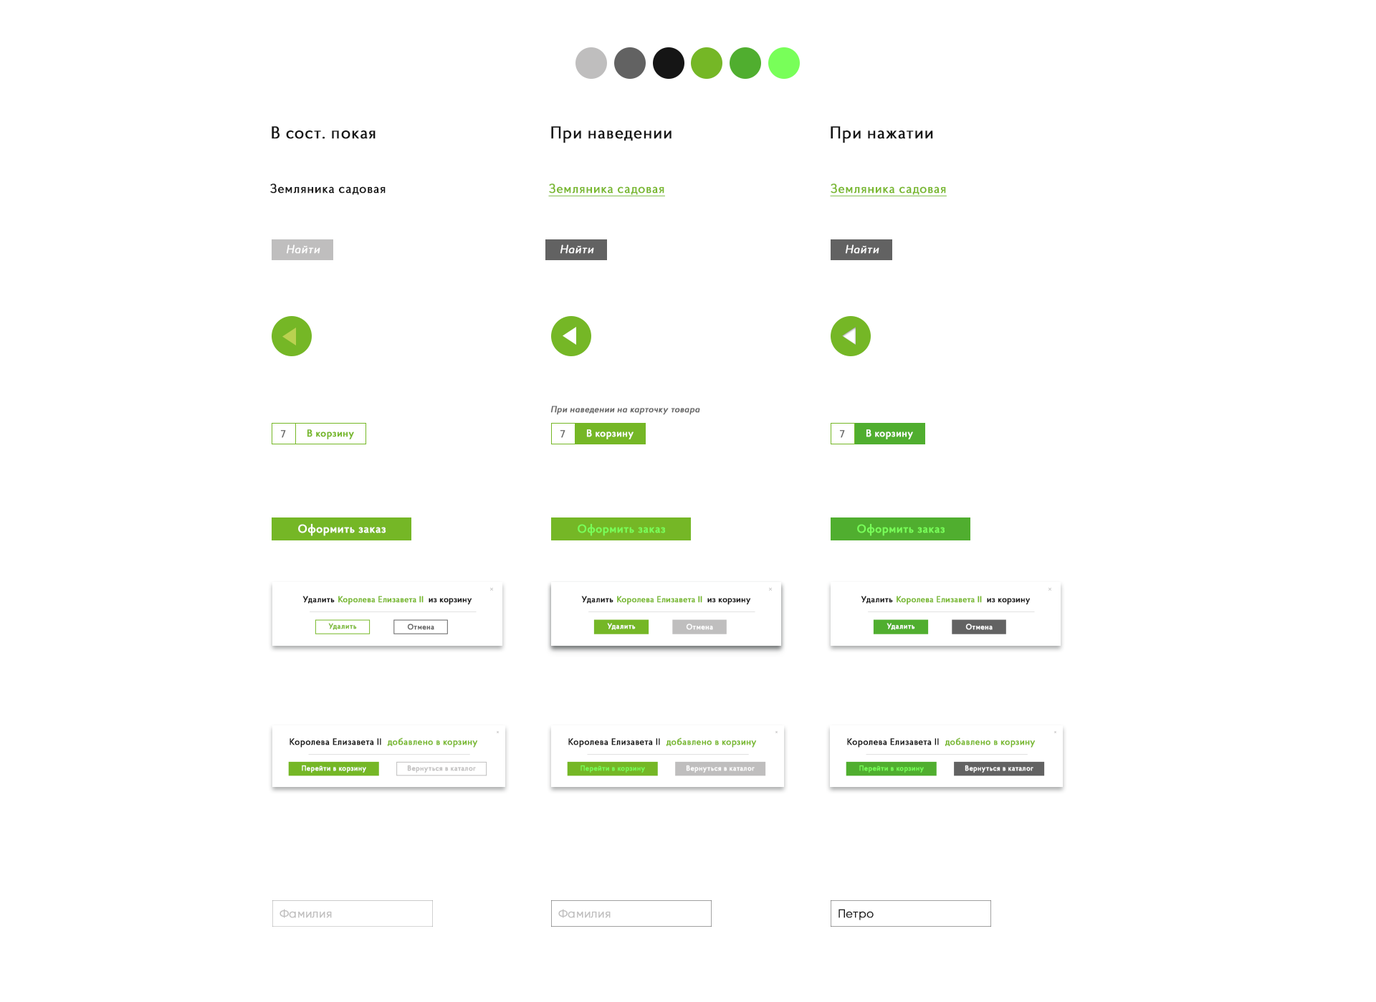
<style>
.page{position:relative;width:1376px;height:1002px;background:#ffffff}
.page>*{position:absolute;margin:0}
.t1{font:17.2px "ProbaPro-Regular";letter-spacing:0.025em;color:#151515;font-weight:bold}
.t2{font:12.9px "ProbaPro-Regular";letter-spacing:0.025em;color:#151515;font-weight:bold}
.t3{font:12.9px "ProbaPro-Regular";letter-spacing:0.025em;color:#78b82c;font-weight:bold;text-decoration:underline}
.t4{font:11.5px "ProbaPro-Italic";letter-spacing:0.025em;color:#ffffff;font-weight:bold}
.t5{font:8.9px "ProbaPro-Italic";letter-spacing:0.025em;color:#626262;font-weight:bold}
.t6{font:10px "ProbaPro-Light";letter-spacing:0.025em;color:#5e5e5e;font-weight:bold}
.t7{font:10px "ProbaPro-Medium";letter-spacing:0.025em;color:#75b726;font-weight:bold}
.t8{font:10px "ProbaPro-Medium";letter-spacing:0.025em;color:#ffffff;font-weight:bold}
.t9{font:11.5px "ProbaPro-Medium";letter-spacing:0.025em;color:#ffffff;font-weight:bold}
.t10{font:11.5px "ProbaPro-Medium";letter-spacing:0.025em;color:#78ff59;font-weight:bold}
.t11{font:8.4px "ProbaPro-Regular";letter-spacing:0.025em;color:#151515;font-weight:bold}
.t12{font:8.4px "ProbaPro-Regular";letter-spacing:0.025em;color:#75b726;font-weight:bold}
.t13{font:7.5px "ProbaPro-Medium";letter-spacing:0.025em;color:#75b726;font-weight:bold}
.t14{font:7.5px "ProbaPro-Medium";letter-spacing:0.025em;color:#626262;font-weight:bold}
.t15{font:7.5px "ProbaPro-Medium";letter-spacing:0.025em;color:#ffffff;font-weight:bold}
.t16{font:9px "ProbaPro-Regular";letter-spacing:0.025em;color:#75b726;font-weight:bold}
.t17{font:9px "ProbaPro-Regular";letter-spacing:0.025em;color:#151515;font-weight:bold}
.t18{font:7.2px "ProbaPro-Medium";letter-spacing:0.025em;color:#ffffff;font-weight:bold}
.t19{font:7.2px "ProbaPro-Medium";letter-spacing:0.025em;color:#bfbebe;font-weight:bold}
.t20{font:7.2px "ProbaPro-Medium";letter-spacing:0.025em;color:#78ff59;font-weight:bold}
.t21{font:7.2px "ProbaPro-Medium";letter-spacing:0.025em;color:#fffefe;font-weight:bold}
.t22{font:11.5px "Gilroy-Light";letter-spacing:0.025em;color:#bfbebe;font-weight:bold}
.t23{font:11.5px "Gilroy-Light";letter-spacing:0.025em;color:#151515;font-weight:bold}
</style>
<div class="page">
<p class="t1" style="left:272px;top:126px;width:104px;height:13px">В сост. покая</p>
<p class="t1" style="left:551px;top:126px;width:121px;height:17px">При наведении</p>
<p class="t1" style="left:831px;top:126px;width:102px;height:17px">При нажатии</p>
<p class="t2" style="left:270px;top:184px;width:116px;height:11px">Земляника садовая</p>
<p class="t3" style="left:548px;top:184px;width:117px;height:12px">Земляника садовая</p>
<p class="t3" style="left:830px;top:184px;width:117px;height:12px">Земляника садовая</p>
<p class="t4" style="left:286px;top:244px;width:34px;height:10px">Найти</p>
<p class="t4" style="left:560px;top:244px;width:34px;height:10px">Найти</p>
<p class="t4" style="left:845px;top:244px;width:35px;height:10px">Найти</p>
<p class="t5" style="left:551px;top:406px;width:149px;height:9px">При наведении на карточку товара</p>
<p class="t6" style="left:280px;top:430px;width:6px;height:8px">7</p>
<p class="t7" style="left:307px;top:429px;width:47px;height:10px">В корзину</p>
<p class="t6" style="left:560px;top:430px;width:6px;height:8px">7</p>
<p class="t8" style="left:586px;top:429px;width:48px;height:10px">В корзину</p>
<p class="t6" style="left:839px;top:430px;width:6px;height:8px">7</p>
<p class="t8" style="left:866px;top:429px;width:47px;height:10px">В корзину</p>
<p class="t9" style="left:298px;top:523px;width:88px;height:13px">Оформить заказ</p>
<p class="t10" style="left:578px;top:523px;width:88px;height:13px">Оформить заказ</p>
<p class="t10" style="left:857px;top:523px;width:89px;height:13px">Оформить заказ</p>
<p class="t11" style="left:303px;top:596px;width:32px;height:8px">Удалить</p>
<p class="t12" style="left:338px;top:596px;width:86px;height:9px">Королева Елизавета II</p>
<p class="t11" style="left:429px;top:598px;width:43px;height:7px">из корзину</p>
<p class="t11" style="left:581px;top:596px;width:33px;height:8px">Удалить</p>
<p class="t12" style="left:617px;top:596px;width:86px;height:9px">Королева Елизавета II</p>
<p class="t11" style="left:708px;top:598px;width:43px;height:7px">из корзину</p>
<p class="t11" style="left:861px;top:596px;width:32px;height:8px">Удалить</p>
<p class="t12" style="left:897px;top:596px;width:85px;height:9px">Королева Елизавета II</p>
<p class="t11" style="left:987px;top:598px;width:44px;height:7px">из корзину</p>
<p class="t13" style="left:328px;top:623px;width:29px;height:7px">Удалить</p>
<p class="t14" style="left:407px;top:624px;width:27px;height:6px">Отмена</p>
<p class="t15" style="left:607px;top:623px;width:29px;height:7px">Удалить</p>
<p class="t15" style="left:686px;top:624px;width:27px;height:6px">Отмена</p>
<p class="t15" style="left:887px;top:623px;width:28px;height:7px">Удалить</p>
<p class="t15" style="left:966px;top:624px;width:27px;height:6px">Отмена</p>
<p class="t16" style="left:387px;top:738px;width:91px;height:10px">добавлено в корзину</p>
<p class="t16" style="left:666px;top:738px;width:91px;height:10px">добавлено в корзину</p>
<p class="t16" style="left:945px;top:738px;width:91px;height:10px">добавлено в корзину</p>
<p class="t17" style="left:290px;top:738px;width:91px;height:10px">Королева Елизавета II</p>
<p class="t17" style="left:568px;top:738px;width:92px;height:10px">Королева Елизавета II</p>
<p class="t17" style="left:847px;top:738px;width:92px;height:10px">Королева Елизавета II</p>
<p class="t18" style="left:302px;top:765px;width:64px;height:8px">Перейти в корзину</p>
<p class="t19" style="left:407px;top:765px;width:69px;height:8px">Вернуться в каталог</p>
<p class="t20" style="left:581px;top:765px;width:64px;height:8px">Перейти в корзину</p>
<p class="t18" style="left:686px;top:765px;width:69px;height:8px">Вернуться в каталог</p>
<p class="t20" style="left:860px;top:765px;width:64px;height:8px">Перейти в корзину</p>
<p class="t21" style="left:965px;top:765px;width:69px;height:8px">Вернуться в каталог</p>
<p class="t22" style="left:280px;top:909px;width:52px;height:9px">Фамилия</p>
<p class="t22" style="left:558px;top:909px;width:53px;height:9px">Фамилия</p>
<p class="t23" style="left:839px;top:909px;width:35px;height:11px">Петро</p>
</div>
